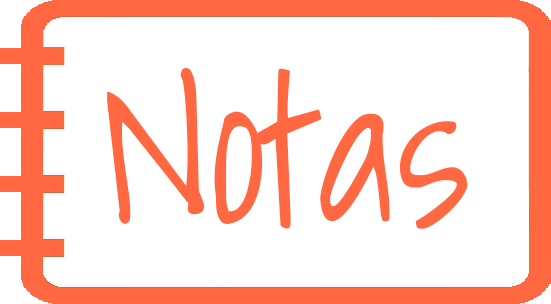
<style>
.page{position:relative;width:551px;height:304px;background:#ffffff}
.page>*{position:absolute;margin:0}
.t1{font:204px "ShadowsIntoLight";color:#ff6840}
</style>
<div class="page">
<p class="t1" style="left:107px;top:68px;width:361px;height:161px">Notas</p>
</div>
